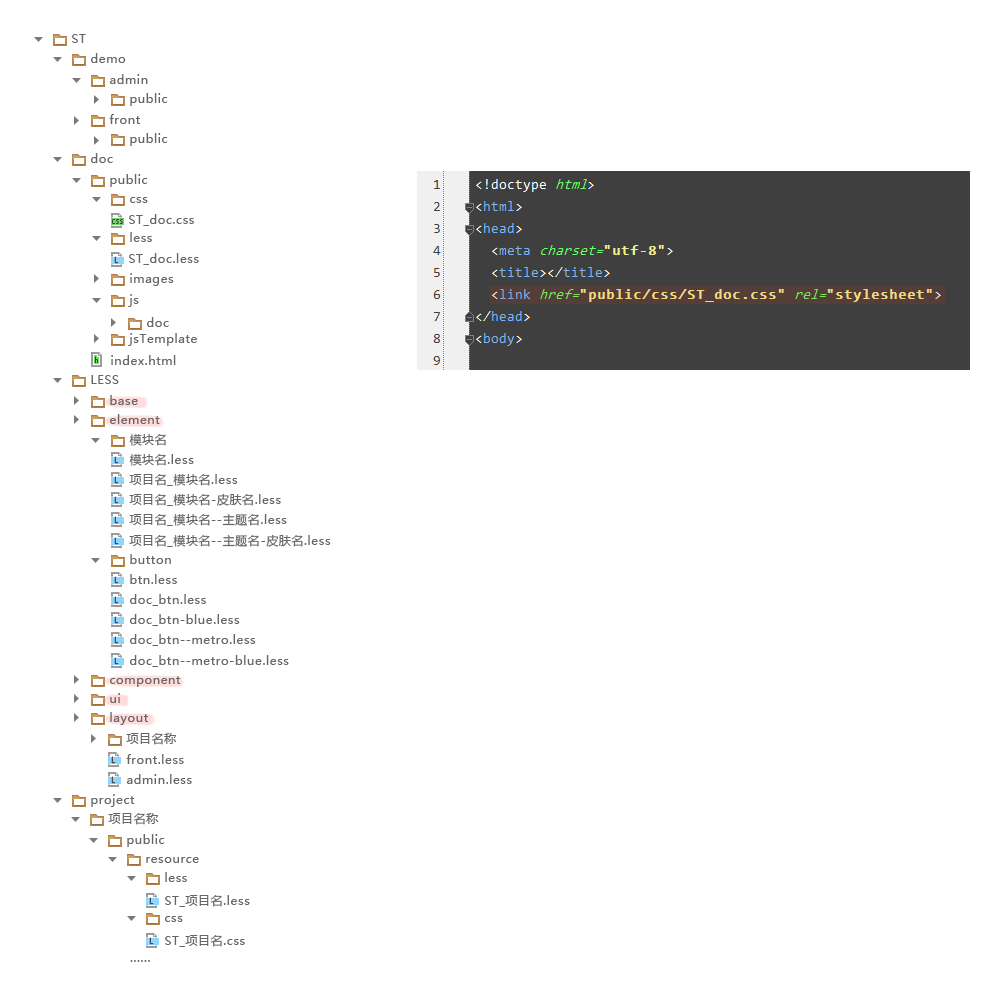
<style>
.page{position:relative;width:1000px;height:1000px;background:#ffffff}
.page>*{position:absolute;margin:0}
.t1{font:12px "MicrosoftYaHei";letter-spacing:0.05em;color:#666666}
</style>
<div class="page">
<p class="t1" style="left:72px;top:34px;width:14px;height:9px">ST</p>
<p class="t1" style="left:91px;top:53px;width:35px;height:10px">demo</p>
<p class="t1" style="left:109px;top:74px;width:39px;height:10px">admin</p>
<p class="t1" style="left:130px;top:93px;width:38px;height:13px">public</p>
<p class="t1" style="left:109px;top:114px;width:31px;height:10px">front</p>
<p class="t1" style="left:130px;top:133px;width:38px;height:13px">public</p>
<p class="t1" style="left:91px;top:153px;width:22px;height:10px">doc</p>
<p class="t1" style="left:110px;top:174px;width:38px;height:13px">public</p>
<p class="t1" style="left:130px;top:197px;width:18px;height:6px">css</p>
<p class="t1" style="left:129px;top:214px;width:65px;height:12px">ST_doc.css</p>
<p class="t1" style="left:130px;top:232px;width:22px;height:10px">less</p>
<p class="t1" style="left:129px;top:253px;width:70px;height:12px">ST_doc.less</p>
<p class="t1" style="left:130px;top:273px;width:44px;height:13px">images</p>
<p class="t1" style="left:128px;top:294px;width:11px;height:13px">js</p>
<p class="t1" style="left:147px;top:317px;width:22px;height:10px">doc</p>
<p class="t1" style="left:128px;top:333px;width:69px;height:13px">jsTemplate</p>
<p class="t1" style="left:111px;top:355px;width:65px;height:10px">index.html</p>
<p class="t1" style="left:91px;top:375px;width:28px;height:9px">LESS</p>
<p class="t1" style="left:110px;top:395px;width:28px;height:10px">base</p>
<p class="t1" style="left:110px;top:414px;width:50px;height:10px">element</p>
<p class="t1" style="left:129px;top:433px;width:37px;height:13px">模块名</p>
<p class="t1" style="left:129px;top:453px;width:65px;height:13px">模块名.less</p>
<p class="t1" style="left:129px;top:473px;width:109px;height:13px">项目名_模块名.less</p>
<p class="t1" style="left:129px;top:493px;width:152px;height:13px">项目名_模块名-皮肤名.less</p>
<p class="t1" style="left:129px;top:513px;width:158px;height:13px">项目名_模块名--主题名.less</p>
<p class="t1" style="left:129px;top:534px;width:202px;height:13px">项目名_模块名--主题名-皮肤名.less</p>
<p class="t1" style="left:130px;top:554px;width:41px;height:10px">button</p>
<p class="t1" style="left:130px;top:574px;width:47px;height:10px">btn.less</p>
<p class="t1" style="left:130px;top:594px;width:76px;height:12px">doc_btn.less</p>
<p class="t1" style="left:130px;top:614px;width:110px;height:12px">doc_btn-blue.less</p>
<p class="t1" style="left:130px;top:634px;width:126px;height:12px">doc_btn--metro.less</p>
<p class="t1" style="left:130px;top:655px;width:159px;height:12px">doc_btn--metro-blue.less</p>
<p class="t1" style="left:110px;top:676px;width:71px;height:11px">component</p>
<p class="t1" style="left:110px;top:693px;width:10px;height:10px">ui</p>
<p class="t1" style="left:110px;top:712px;width:38px;height:13px">layout</p>
<p class="t1" style="left:126px;top:733px;width:51px;height:12px">项目名称</p>
<p class="t1" style="left:126px;top:754px;width:58px;height:10px">front.less</p>
<p class="t1" style="left:126px;top:774px;width:66px;height:10px">admin.less</p>
<p class="t1" style="left:91px;top:794px;width:44px;height:13px">project</p>
<p class="t1" style="left:108px;top:813px;width:51px;height:12px">项目名称</p>
<p class="t1" style="left:127px;top:834px;width:38px;height:13px">public</p>
<p class="t1" style="left:146px;top:857px;width:53px;height:6px">resource</p>
<p class="t1" style="left:165px;top:872px;width:22px;height:10px">less</p>
<p class="t1" style="left:165px;top:895px;width:85px;height:12px">ST_项目名.less</p>
<p class="t1" style="left:165px;top:916px;width:18px;height:6px">css</p>
<p class="t1" style="left:165px;top:935px;width:80px;height:12px">ST_项目名.css</p>
<p class="t1" style="left:130px;top:960px;width:20px;height:2px">......</p>
</div>
